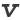
<style>
.page{position:relative;width:20px;height:20px;background:#ffffff}
.page>*{position:absolute;margin:0}
.t1{font:30px "Courier-Bold";letter-spacing:-0.025em;color:#393939;font-style:italic}
</style>
<div class="page">
<p class="t1" style="left:1px;top:4px;width:19px;height:13px">v</p>
</div>
